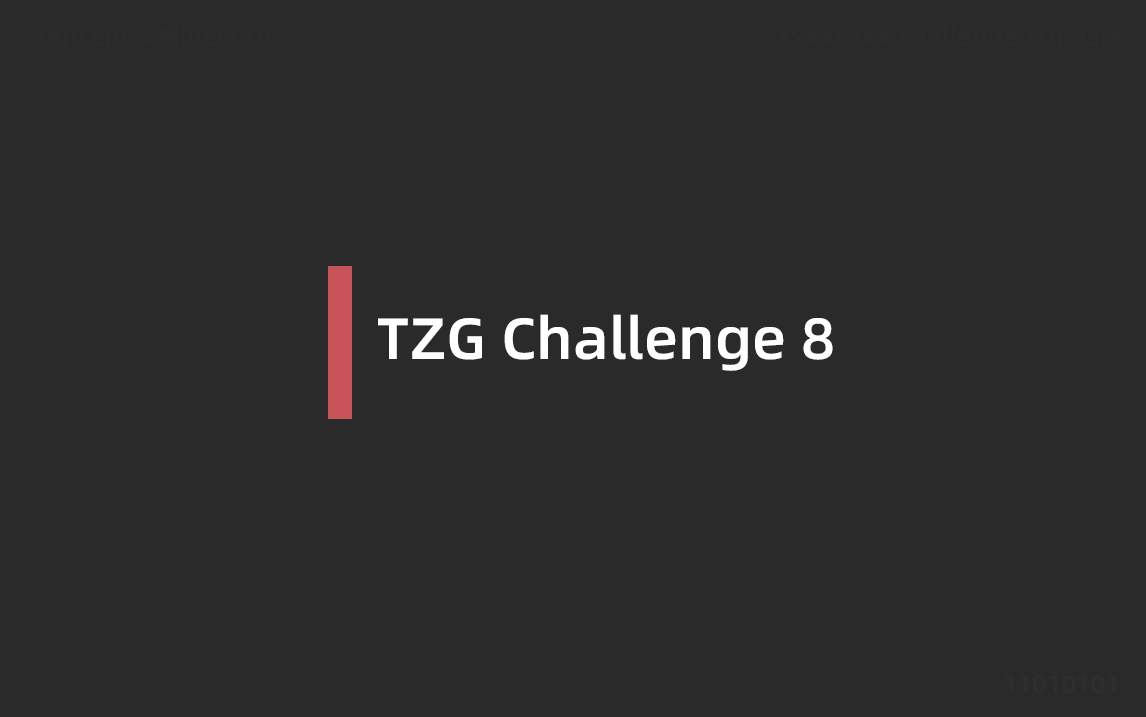
<style>
.page{position:relative;width:1146px;height:717px;background:#2a2a2a}
.page>*{position:absolute;margin:0}
.t1{font:58.3px "AlibabaPuHuiTi-Medium";color:#ffffff}
</style>
<div class="page">
<p class="t1" style="left:378px;top:314px;width:455px;height:57px">TZG Challenge 8</p>
</div>
